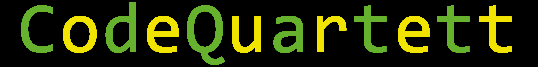
<style>
.page{position:relative;width:538px;height:67px;background:#000000}
.page>*{position:absolute;margin:0}
.t1{font:72px "Consolas";letter-spacing:0.029em;color:#66b22e}
.t2{font:72px "Consolas";letter-spacing:0.029em;color:#f1e401}
</style>
<div class="page">
<p class="t1" style="left:21px;top:2px;width:491px;height:63px">C<span class="t2">o</span>d<span class="t2">e</span>Q<span class="t2">u</span>a<span class="t2">r</span>t<span class="t2">e</span>t<span class="t2">t</span></p>
</div>
